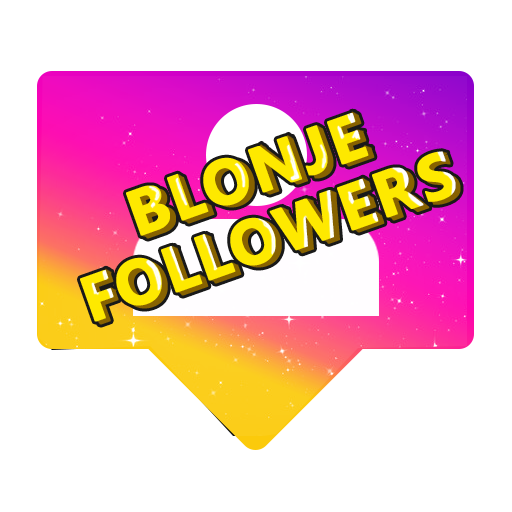
<style>
.page{position:relative;width:512px;height:512px;background:#ffffff}
.page>*{position:absolute;margin:0}
.t1{font:63.4px/65.6px "SegoeUI-Bold";color:#fee900;text-transform:uppercase;font-weight:bold}
.t2{font:63.4px/65.6px "SegoeUI-Bold";text-transform:uppercase;font-weight:bold}
</style>
<div class="page">
<p class="t1" style="left:80px;top:113px;width:376px;height:209px;text-align:center;rotate:-20deg">Blonje<br>Followers</p>
<p class="t2" style="left:85px;top:115px;width:376px;height:210px;text-align:center;rotate:-20deg">Blonje<br>Followers</p>
</div>
